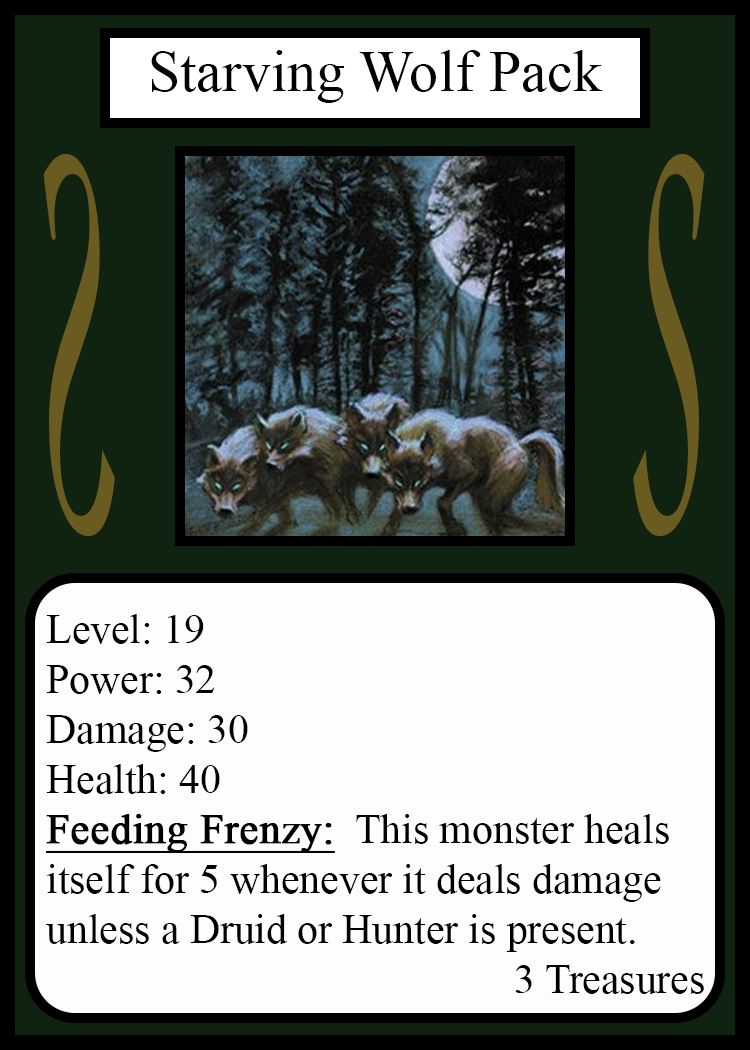
<style>
.page{position:relative;width:750px;height:1050px;background:#fffcfc}
.page>*{position:absolute;margin:0}
.t1{font:58.3px "TimesNewRomanPSMT";color:#010101}
.t2{font:548.5px "Apple-Chancery";color:#6a5c21;scale:0.27 1}
.t3{font:548.2px "Apple-Chancery";color:#6a5c21;scale:0.27 1}
.t4{font:41.7px "TimesNewRomanPSMT";color:#000000}
.t5{font:41.7px "TimesNewRomanPSMT";color:#000000;font-weight:bold;text-decoration:underline}
</style>
<div class="page">
<p class="t1" style="left:151px;top:50px;width:452px;height:53px">Starving Wolf Pack</p>
<p class="t2" style="left:43px;top:154px;width:72px;height:382px;rotate:180deg">S</p>
<p class="t3" style="left:633px;top:154px;width:72px;height:382px">S</p>
<p class="t4" style="left:46px;top:614px;width:658px;height:380px">Level: 19<br>Power: 32<br>Damage: 30<br>Health: 40<br><span class="t5">Feeding Frenzy:</span>  This monster heals<br>itself for 5 whenever it deals damage<br>unless a Druid or Hunter is present.<br>             3 Treasures</p>
</div>
